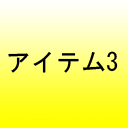
<style>
.page{position:relative;width:128px;height:128px}
.page>*{position:absolute;margin:0}
.t1{font:25px "MS-Gothic";color:#000000}
</style>
<div class="page">
<p class="t1" style="left:8px;top:51px;width:110px;height:22px">アイテム3</p>
</div>
